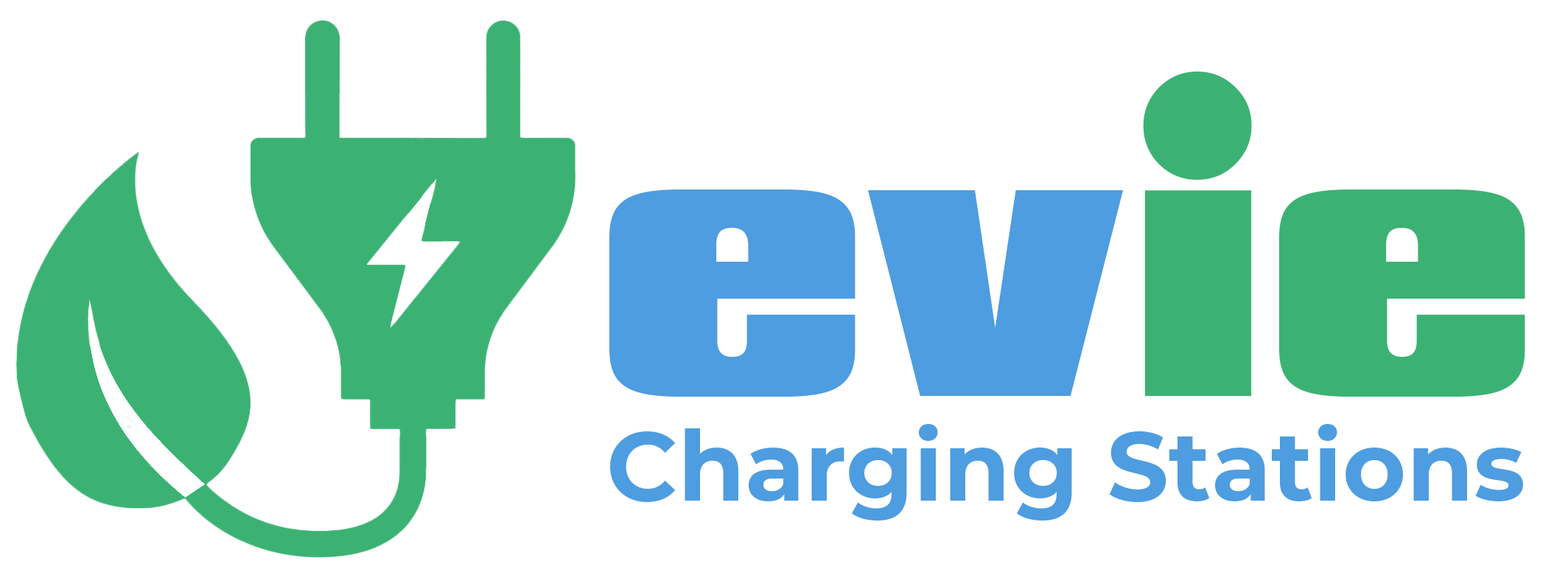
<style>
.page{position:relative;width:1568px;height:581px;background:#ffffff}
.page>*{position:absolute;margin:0}
.t1{font:322.2px "Padaloma";color:#4d9de0}
.t2{font:322.2px "Padaloma";color:#3bb273}
.t3{font:97.3px "Montserrat-Bold";color:#4d9de0}
</style>
<div class="page">
<p class="t1" style="left:609px;top:71px;width:916px;height:325px">ev<span class="t2">ie</span></p>
<p class="t3" style="left:610px;top:424px;width:913px;height:96px">Charging Stations</p>
</div>
